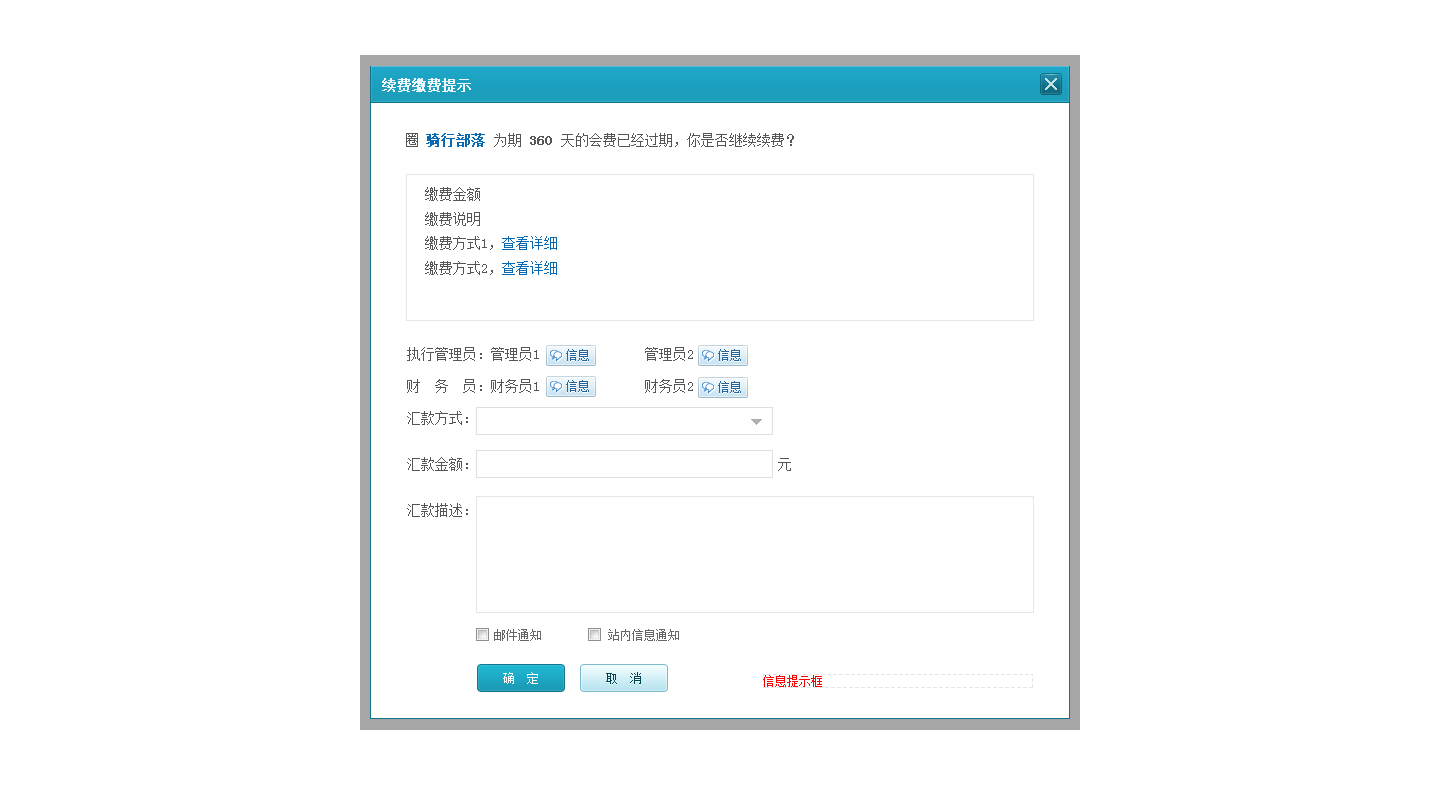
<style>
.page{position:relative;width:1440px;height:810px;background:#ffffff}
.page>*{position:absolute;margin:0}
.t1{font:14px "SimSun";color:#eef7fe;font-weight:bold}
.t2{font:14px "SimSun";color:#555555}
.t3{font:14px "SimSun";color:#0869b0;font-weight:bold}
.t4{font:14px "SimSun";color:#555555;font-weight:bold}
.t5{font:14px "SimSun";color:#0869b0}
.t6{font:14px/32px "SimSun";color:#555555}
.t7{font:14px/46px "SimSun";color:#555555}
.t8{font:12px "SimSun";color:#24659f}
.t9{font:12px "SimSun";color:#666666}
.t10{font:12px "SimSun";color:#ffffff}
.t11{font:12px "SimSun";color:#044455}
</style>
<div class="page">
<p class="t1" style="left:382px;top:78px;width:89px;height:14px">续费缴费提示</p>
<p class="t2" style="left:406px;top:133px;width:388px;height:14px">圈 <span class="t3">骑行部落 </span>为期 <span class="t4">360 </span>天的会费已经过期，你是否继续续费？</p>
<p class="t2" style="left:425px;top:187px;width:132px;height:88px">缴费金额<br>缴费说明<br>缴费方式1，<span class="t5">查看详细<br></span>缴费方式2，<span class="t5">查看详细</span></p>
<p class="t6" style="left:407px;top:347px;width:384px;height:170px">执行管理员：管理员1               管理员2   <br>财  务  员：财务员1               财务员2<br><span class="t7">汇款方式：<br>汇款金额：                                           元<br>汇款描述：</span></p>
<p class="t8" style="left:566px;top:349px;width:23px;height:12px">信息</p>
<p class="t8" style="left:718px;top:349px;width:23px;height:12px">信息</p>
<p class="t8" style="left:566px;top:380px;width:23px;height:12px">信息</p>
<p class="t8" style="left:718px;top:381px;width:23px;height:12px">信息</p>
<p class="t9" style="left:494px;top:629px;width:185px;height:12px">邮件通知           站内信息通知</p>
<p class="t10" style="left:503px;top:672px;width:35px;height:12px">确  定</p>
<p class="t11" style="left:606px;top:672px;width:35px;height:12px">取  消</p>
</div>
